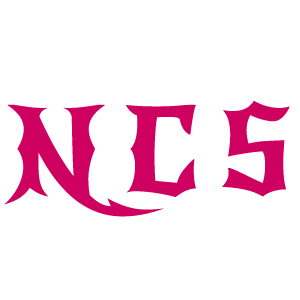
<style>
.page{position:relative;width:300px;height:300px;background:#ffffff}
.page>*{position:absolute;margin:0}
.t1{font:116.7px "NewRocker-Regular";letter-spacing:0.12em;color:#ce0060;scale:1.11 1}
</style>
<div class="page">
<p class="t1" style="left:4px;top:100px;width:286px;height:117px">NCS</p>
</div>
